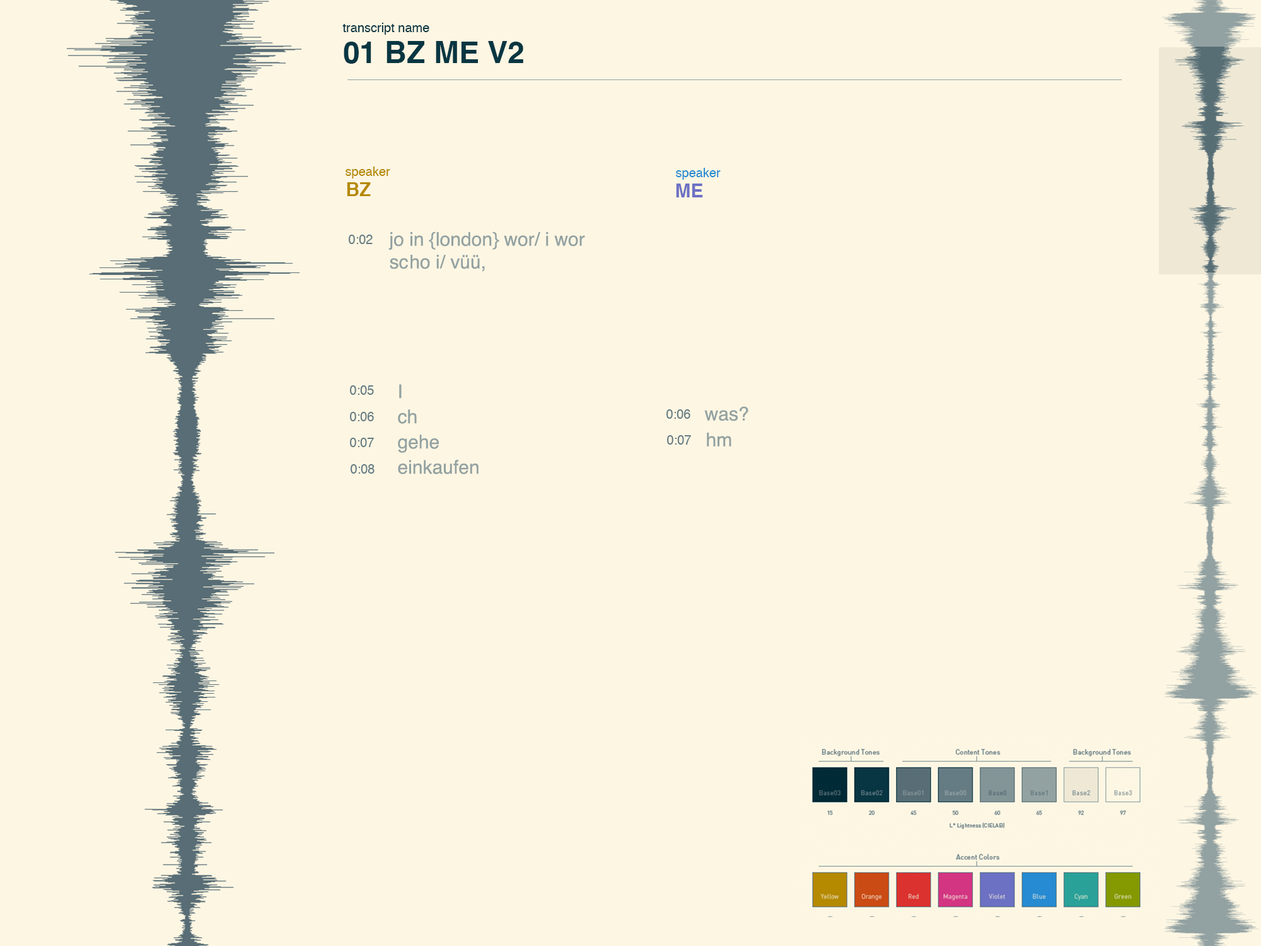
<style>
.page{position:relative;width:1261px;height:946px;background:#fdf6e3}
.page>*{position:absolute;margin:0}
.t1{font:12.6px "Helvetica";color:#083642}
.t2{font:30.3px "Helvetica-Bold";color:#083642}
.t3{font:12.6px "Helvetica";color:#b58a00}
.t4{font:12.6px "Helvetica";color:#268bd2}
.t5{font:18.9px "Helvetica-Bold";color:#b58a00}
.t6{font:18.9px "Helvetica-Bold";color:#6d71c4}
.t7{font:18.9px "Helvetica";color:#92a1a1}
.t8{font:12.6px "Helvetica";color:#657c83}
.t9{font:18.9px/25.2px "Helvetica";color:#92a1a1}
.t10{font:12.6px "Helvetica";color:#657b83}
</style>
<div class="page">
<p class="t1" style="left:342px;top:23px;width:87px;height:12px">transcript name</p>
<p class="t2" style="left:344px;top:41px;width:179px;height:23px">01 BZ ME V2</p>
<p class="t3" style="left:345px;top:166px;width:45px;height:12px">speaker</p>
<p class="t4" style="left:676px;top:168px;width:45px;height:12px">speaker</p>
<p class="t5" style="left:347px;top:182px;width:24px;height:14px">BZ</p>
<p class="t6" style="left:676px;top:183px;width:27px;height:14px">ME</p>
<p class="t7" style="left:388px;top:231px;width:197px;height:41px">jo in {london} wor/ i wor<br>scho i/ vüü,</p>
<p class="t8" style="left:349px;top:235px;width:24px;height:9px">0:02</p>
<p class="t8" style="left:350px;top:385px;width:24px;height:10px">0:05</p>
<p class="t9" style="left:398px;top:384px;width:81px;height:90px">I<br>ch<br>gehe<br>einkaufen</p>
<p class="t8" style="left:350px;top:412px;width:24px;height:9px">0:06</p>
<p class="t10" style="left:666px;top:409px;width:24px;height:10px">0:06</p>
<p class="t7" style="left:704px;top:406px;width:44px;height:15px">was?</p>
<p class="t8" style="left:350px;top:438px;width:24px;height:9px">0:07</p>
<p class="t10" style="left:667px;top:435px;width:24px;height:9px">0:07</p>
<p class="t7" style="left:707px;top:432px;width:24px;height:14px">hm</p>
<p class="t8" style="left:351px;top:464px;width:23px;height:9px">0:08</p>
</div>
